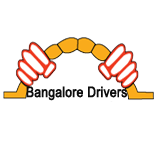
<style>
.page{position:relative;width:158px;height:158px;background:#ffffff}
.page>*{position:absolute;margin:0}
.t1{font:14.4px "ArialMT";color:#0d0d0d;font-weight:bold;scale:0.83 1}
</style>
<div class="page">
<p class="t1" style="left:26px;top:86px;width:101px;height:15px">Bangalore Drivers</p>
</div>
